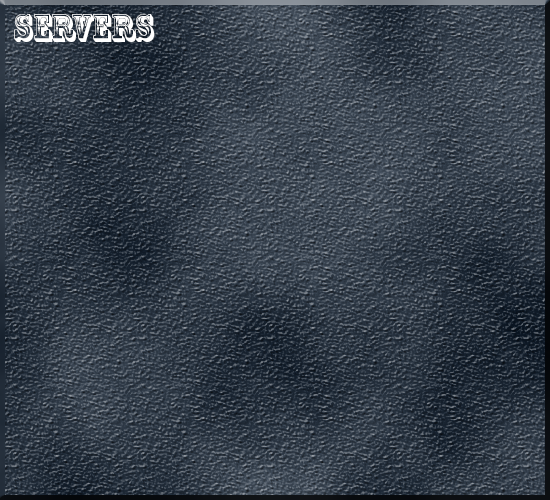
<style>
.page{position:relative;width:550px;height:500px}
.page>*{position:absolute;margin:0}
.t1{font:36px "RosewoodStd-Regular";color:#ffffff}
</style>
<div class="page">
<p class="t1" style="left:14px;top:14px;width:141px;height:28px">Servers</p>
</div>
